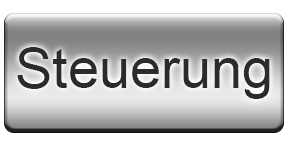
<style>
.page{position:relative;width:288px;height:144px;background:#ffffff}
.page>*{position:absolute;margin:0}
.t1{font:56px "ArialMT";color:#2b2b2b}
</style>
<div class="page">
<p class="t1" style="left:17px;top:47px;width:253px;height:52px">Steuerung</p>
</div>
